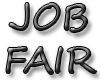
<style>
.page{position:relative;width:100px;height:80px;background:#ffffff}
.page>*{position:absolute;margin:0}
.t1{font:36px "SegoeScript"}
</style>
<div class="page">
<p class="t1" style="left:6px;top:3px;width:91px;height:71px;text-align:center">JOB  FAIR</p>
</div>
